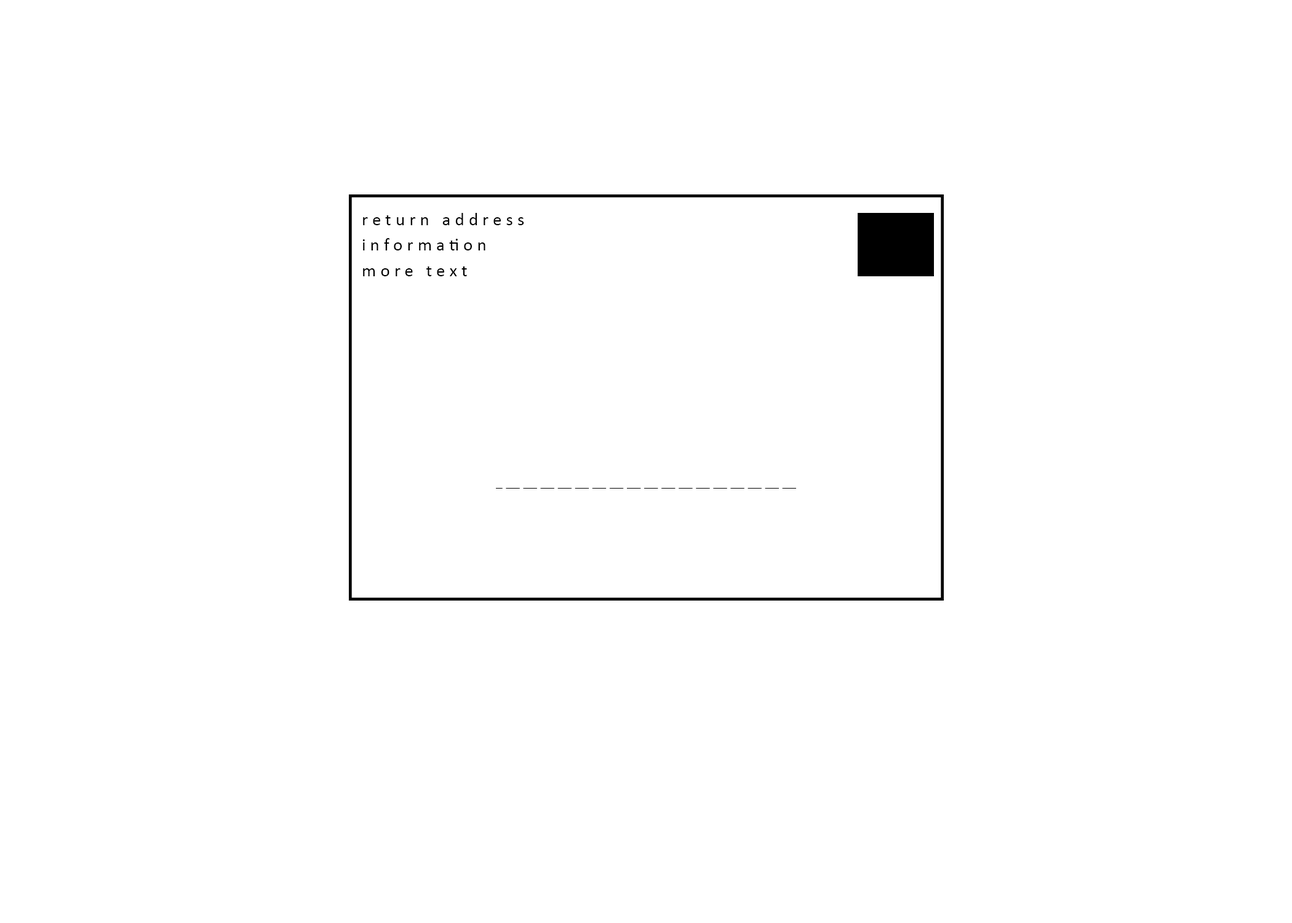
<style>
.page{position:relative;width:1292px;height:923px;background:#ffffff}
.page>*{position:absolute;margin:0}
.t1{font:18px/25.6px "Calibri";letter-spacing:0.24em;color:#000000}
</style>
<div class="page">
<p class="t1" style="left:362px;top:213px;width:162px;height:63px">return address information<br>more text</p>
</div>
